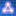
<style>
.page{position:relative;width:16px;height:16px}
.page>*{position:absolute;margin:0}
.t1{font:18px "Monaco";color:#ffffff}
</style>
<div class="page">
<p class="t1" style="left:3px;top:3px;width:10px;height:9px">∴</p>
</div>
